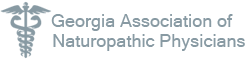
<style>
.page{position:relative;width:251px;height:59px;background:#ffffff}
.page>*{position:absolute;margin:0}
.t1{font:18px "MicrosoftSansSerif";color:#889aa3}
</style>
<div class="page">
<p class="t1" style="left:51px;top:14px;width:182px;height:17px">Georgia Association of</p>
<p class="t1" style="left:53px;top:34px;width:192px;height:17px">Naturopathic Physicians</p>
</div>
